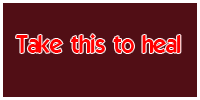
<style>
.page{position:relative;width:200px;height:100px;background:#510e15}
.page>*{position:absolute;margin:0}
.t1{font:24px "ELEGANCE";color:#ff0000}
</style>
<div class="page">
<p class="t1" style="left:16px;top:34px;width:165px;height:19px">Take this to heal</p>
</div>
